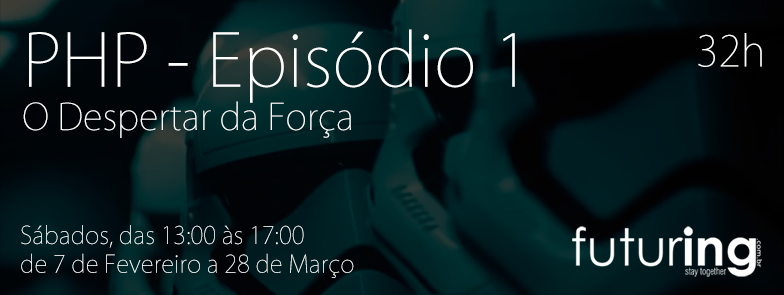
<style>
.page{position:relative;width:784px;height:295px}
.page>*{position:absolute;margin:0}
.t1{font:36px "KozGoPro-ExtraLight";color:#ffffff}
.t2{font:72px "KozGoPro-ExtraLight";color:#ffffff}
.t3{font:42px "KozGoPro-ExtraLight";color:#ffffff}
.t4{font:24px "KozGoPro-ExtraLight";color:#ffffff}
</style>
<div class="page">
<p class="t1" style="left:23px;top:29px;width:492px;height:109px"><span class="t2">PHP - Episódio 1<br></span>O Despertar da Força</p>
<p class="t3" style="left:698px;top:33px;width:64px;height:34px">32h</p>
<p class="t4" style="left:21px;top:225px;width:333px;height:53px">Sábados, das 13:00 às 17:00<br>de 7 de Fevereiro a 28 de Março</p>
</div>
